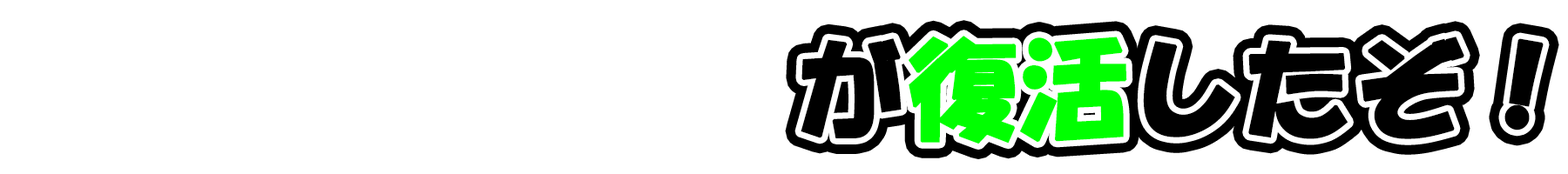
<style>
.page{position:relative;width:1568px;height:174px;background:#ffffff}
.page>*{position:absolute;margin:0}
.t1{font:108.9px "HGSoeiKakupoptai";color:#000000;font-weight:bold}
.t2{font:108.9px "HGSoeiKakupoptai";color:#00ff00;font-weight:bold}
</style>
<div class="page">
<p class="t1" style="left:801px;top:36px;width:743px;height:108px">が<span class="t2">復活</span>したぞ！</p>
</div>
